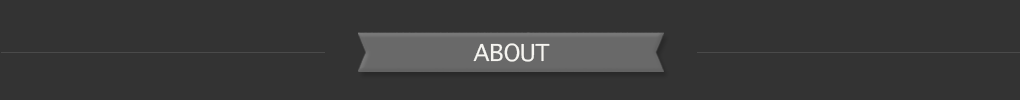
<style>
.page{position:relative;width:1020px;height:100px;background:#333333}
.page>*{position:absolute;margin:0}
.t1{font:22.4px "Thonburi";color:#f6f5f1}
</style>
<div class="page">
<p class="t1" style="left:473px;top:43px;width:77px;height:19px">ABOUT</p>
</div>
